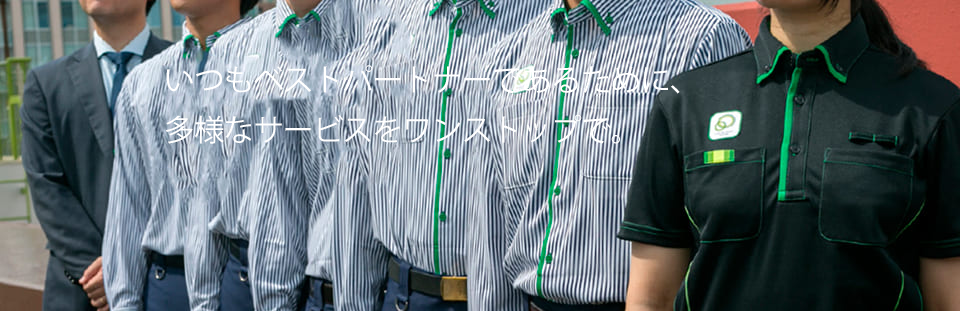
<style>
.page{position:relative;width:960px;height:311px}
.page>*{position:absolute;margin:0}
.t1{font:30px/25px "KozGoPr6N-Regular";letter-spacing:-0.02em;color:#ffffff}
</style>
<div class="page">
<p class="t1" style="left:165px;top:65px;width:515px;height:79px">いつもベストパートナーであるために、<br><br>多様なサービスをワンストップで。</p>
</div>
